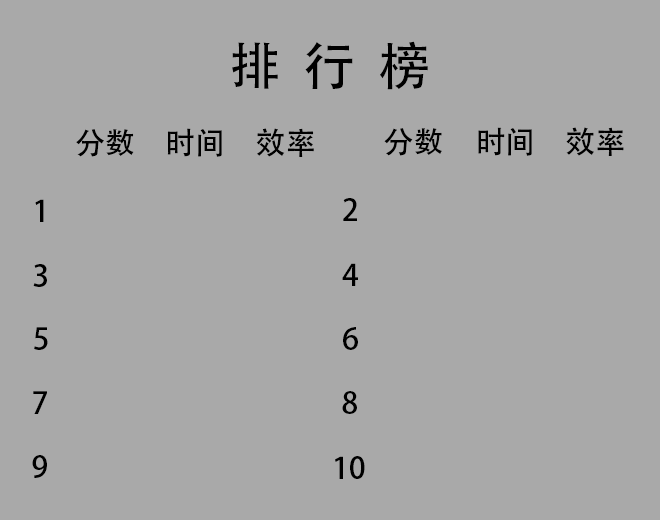
<style>
.page{position:relative;width:660px;height:520px;background:#a9a9a9}
.page>*{position:absolute;margin:0}
.t1{font:52px "AdobeHeitiStd-Regular";letter-spacing:0.44em;color:#000000}
.t2{font:30px "AdobeHeitiStd-Regular";color:#000000}
</style>
<div class="page">
<p class="t1" style="left:232px;top:41px;width:196px;height:49px">排行榜</p>
<p class="t2" style="left:76px;top:129px;width:58px;height:28px">分数</p>
<p class="t2" style="left:167px;top:128px;width:55px;height:29px">时间</p>
<p class="t2" style="left:256px;top:128px;width:58px;height:29px">效率</p>
<p class="t2" style="left:384px;top:128px;width:58px;height:28px">分数</p>
<p class="t2" style="left:478px;top:127px;width:54px;height:29px">时间</p>
<p class="t2" style="left:566px;top:127px;width:58px;height:29px">效率</p>
<p class="t2" style="left:343px;top:198px;width:14px;height:23px">2</p>
<p class="t2" style="left:35px;top:199px;width:9px;height:23px">1</p>
<p class="t2" style="left:33px;top:264px;width:14px;height:23px">3</p>
<p class="t2" style="left:342px;top:263px;width:16px;height:23px">4</p>
<p class="t2" style="left:34px;top:327px;width:14px;height:23px">5</p>
<p class="t2" style="left:343px;top:327px;width:15px;height:23px">6</p>
<p class="t2" style="left:33px;top:391px;width:14px;height:23px">7</p>
<p class="t2" style="left:342px;top:391px;width:15px;height:23px">8</p>
<p class="t2" style="left:32px;top:455px;width:15px;height:23px">9</p>
<p class="t2" style="left:335px;top:456px;width:30px;height:23px">10</p>
</div>
